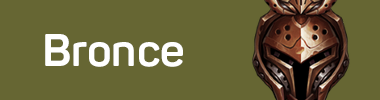
<style>
.page{position:relative;width:380px;height:100px;background:#666633}
.page>*{position:absolute;margin:0}
.t1{font:45px "Panton-Bold";color:#ffffff}
</style>
<div class="page">
<p class="t1" style="left:45px;top:34px;width:138px;height:33px">Bronce</p>
</div>
